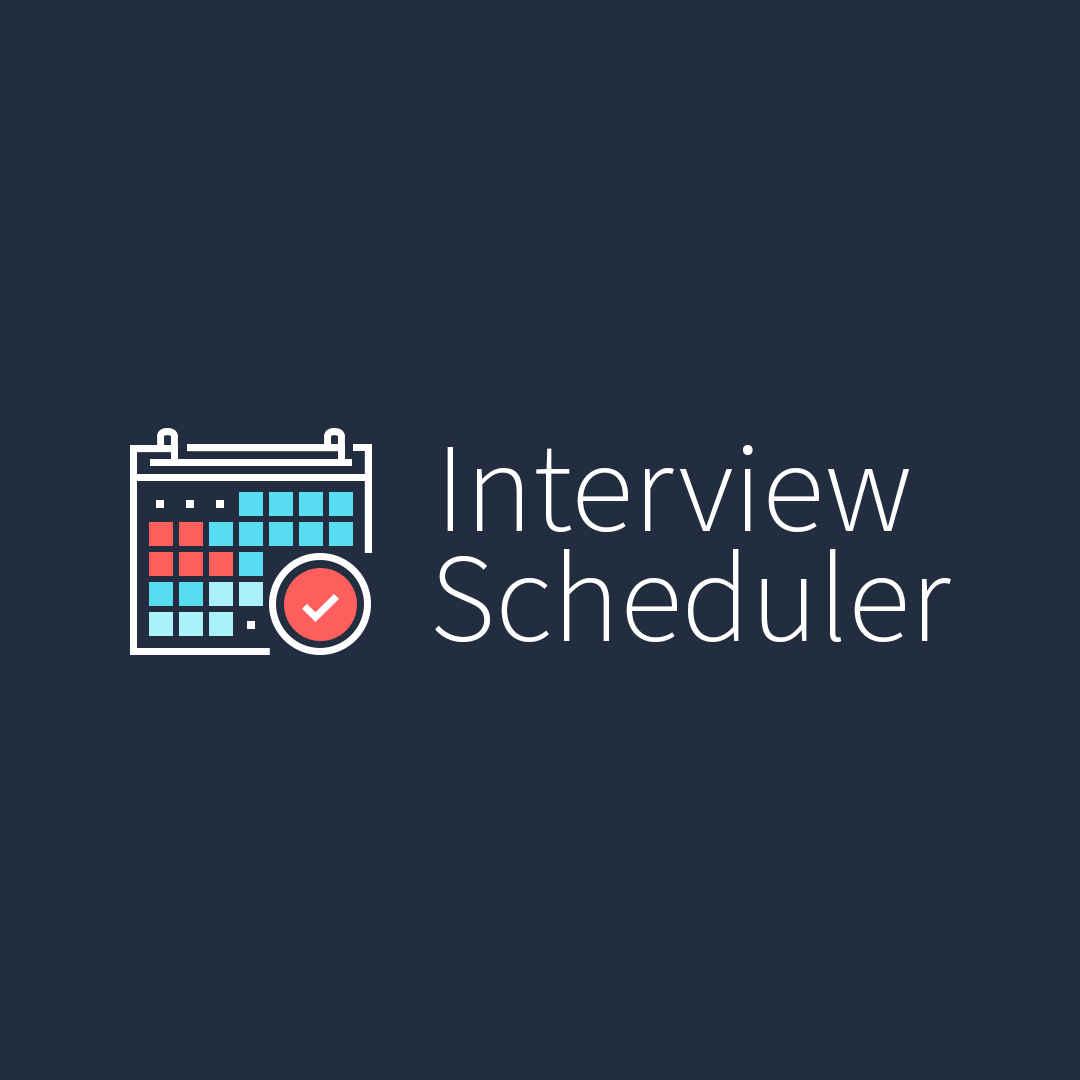
<style>
.page{position:relative;width:1080px;height:1080px;background:#222e3f}
.page>*{position:absolute;margin:0}
.t1{font:127.9px "SourceSansPro-Light";color:#ffffff}
</style>
<div class="page">
<p class="t1" style="left:447px;top:445px;width:462px;height:87px">Interview</p>
<p class="t1" style="left:435px;top:549px;width:516px;height:93px">Scheduler</p>
</div>
